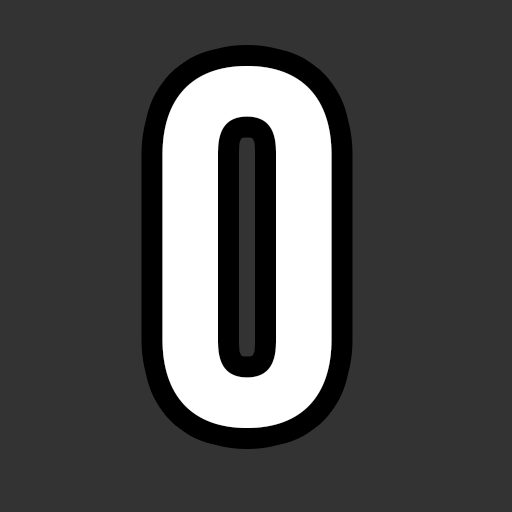
<style>
.page{position:relative;width:512px;height:512px;background:#333333}
.page>*{position:absolute;margin:0}
.t1{font:505.1px "BebasNeueBold";color:#ffffff}
</style>
<div class="page">
<p class="t1" style="left:162px;top:66px;width:170px;height:362px">0</p>
</div>
